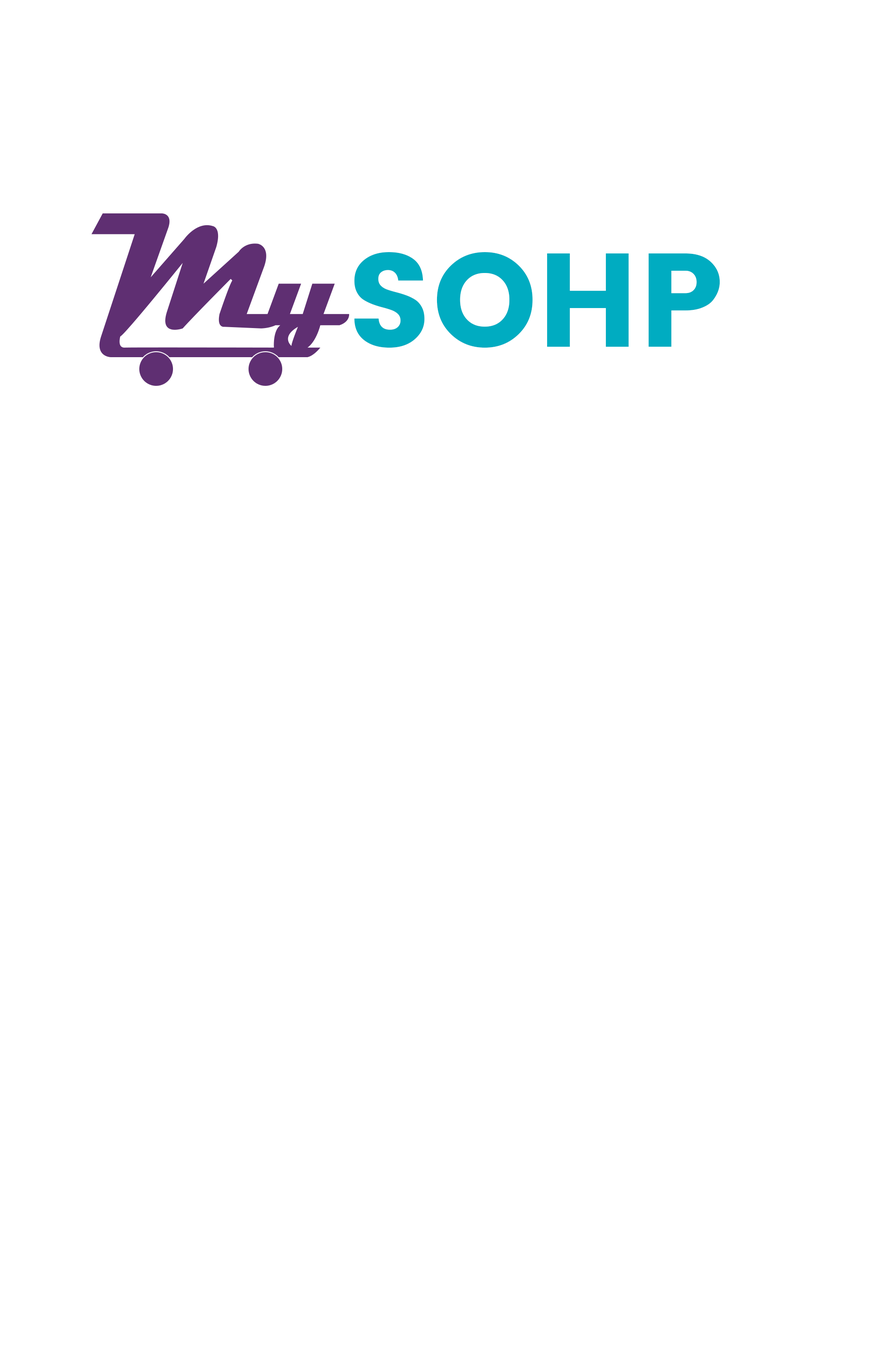
<style>
.page{position:relative;width:874px;height:1365px;background:#ffffff}
.page>*{position:absolute;margin:0}
.t1{font:132.9px "Poppins";color:#00acc1;text-transform:uppercase}
</style>
<div class="page">
<p class="t1" style="left:354px;top:252px;width:366px;height:96px">Sohp</p>
</div>
